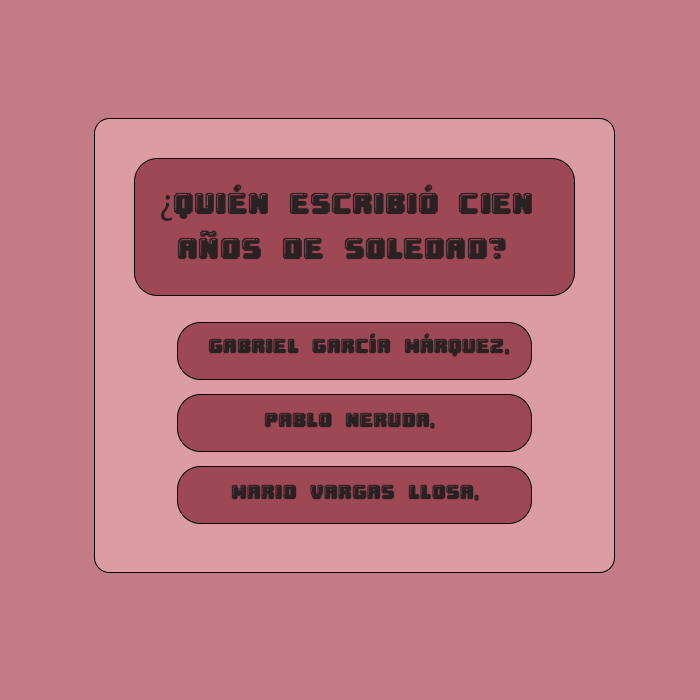
<style>
.page{position:relative;width:700px;height:700px;background:#c37b87}
.page>*{position:absolute;margin:0}
.t1{font:37.5px "Gumball";color:#2a2122}
.t2{font:37.5px "MyriadPro-Regular";color:#2a2122}
.t3{font:25px "Gumball";color:#2a2122}
</style>
<div class="page">
<p class="t1" style="left:161px;top:184px;width:371px;height:76px"><span class="t2">¿</span>Quién escribió Cien<br> años de soledad?</p>
<p class="t3" style="left:208px;top:333px;width:302px;height:24px">Gabriel García Márquez,</p>
<p class="t3" style="left:264px;top:412px;width:171px;height:17px">Pablo Neruda,</p>
<p class="t3" style="left:231px;top:484px;width:248px;height:17px">Mario Vargas Llosa,</p>
</div>
